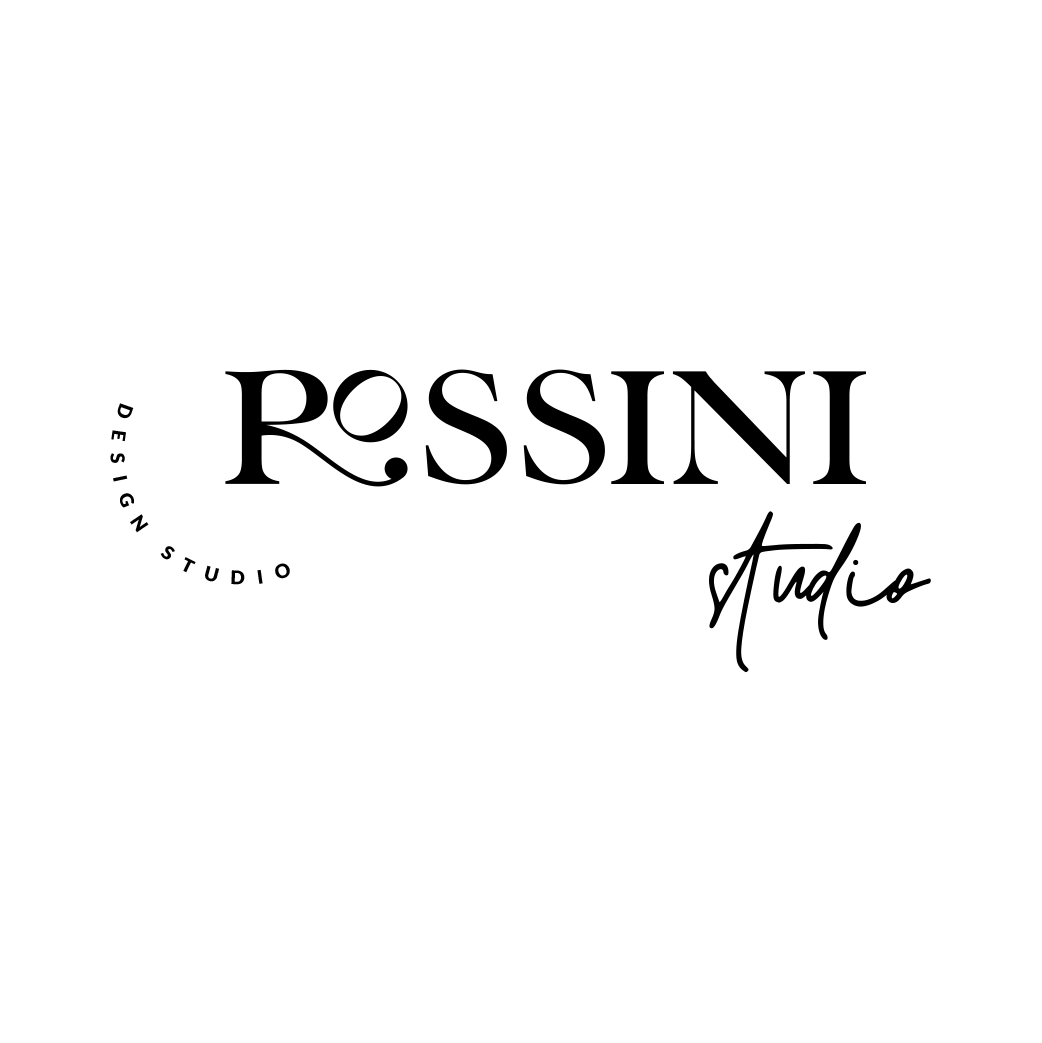
<style>
.page{position:relative;width:1042px;height:1043px;background:#ffffff}
.page>*{position:absolute;margin:0}
.t1{font:161.1px "LorettoRegular";color:#000000;text-transform:uppercase}
.t2{font:18.8px "Lato-Black";letter-spacing:0.7em;color:#000000;text-transform:uppercase}
.t3{font:129.2px "BestermindRegular";color:#000000}
</style>
<div class="page">
<p class="t1" style="left:225px;top:369px;width:641px;height:118px">ROSSINI</p>
<p class="t2" style="left:110px;top:403px;width:180px;height:182px;text-align:center">DESIGN STUDIO</p>
<p class="t3" style="left:709px;top:511px;width:222px;height:162px">studio</p>
</div>
